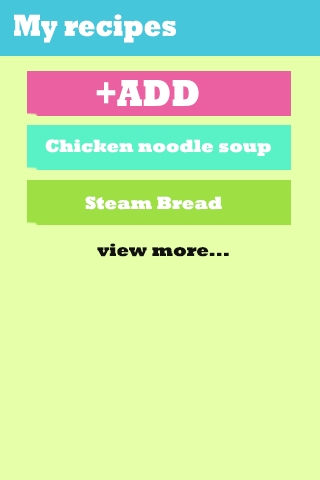
<style>
.page{position:relative;width:320px;height:480px;background:#e6ffa9}
.page>*{position:absolute;margin:0}
.t1{font:30.6px "Rockwell-ExtraBold";color:#ffffff;scale:0.83 1}
.t2{font:37.9px "Rockwell-ExtraBold";color:#ffffff;scale:0.87 1}
.t3{font:18px "Rockwell-ExtraBold";color:#ffffff}
.t4{font:18px "Rockwell-ExtraBold";color:#111111}
</style>
<div class="page">
<p class="t1" style="left:14px;top:14px;width:162px;height:29px">My recipes</p>
<p class="t2" style="left:96px;top:80px;width:103px;height:26px">+ADD</p>
<p class="t3" style="left:45px;top:139px;width:226px;height:17px">Chicken noodle soup</p>
<p class="t3" style="left:85px;top:196px;width:137px;height:14px">Steam Bread</p>
<p class="t4" style="left:97px;top:243px;width:132px;height:14px">view more...</p>
</div>
